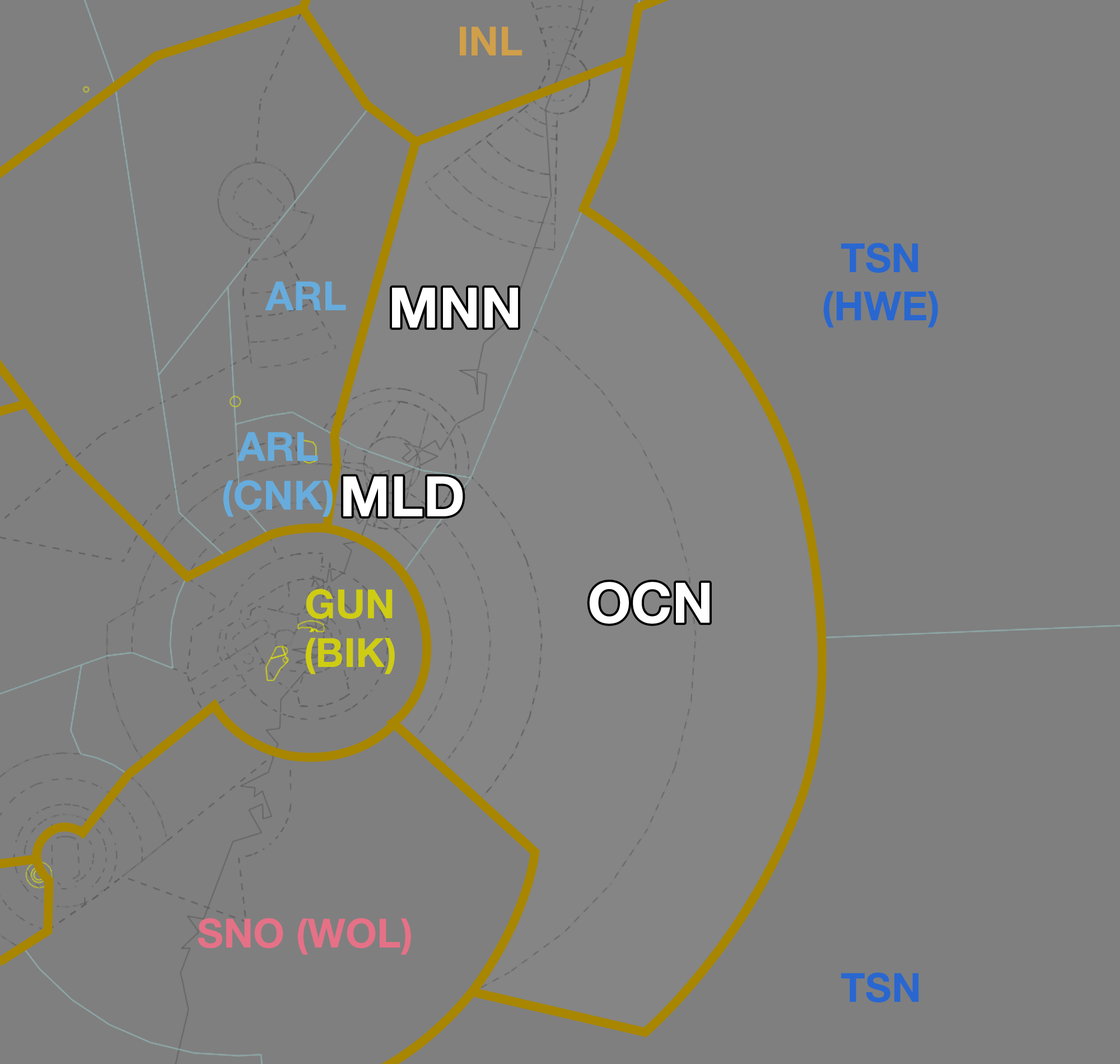
<style>
.page{position:relative;width:1120px;height:1064px;background:#7f7f7f}
.page>*{position:absolute;margin:0}
.t1{font:40.3px "HelveticaNeue-Bold";color:#d09f4a}
.t2{font:40.3px "HelveticaNeue-Bold";color:#2967cf}
.t3{font:40.3px "HelveticaNeue-Bold";color:#67acdc}
.t4{font:56px "HelveticaNeue-Bold";color:#ffffff}
.t5{font:40.3px "HelveticaNeue-Bold";color:#cecc13}
.t6{font:40.3px "HelveticaNeue-Bold";color:#e57187}
</style>
<div class="page">
<p class="t1" style="left:460px;top:26px;width:63px;height:29px">INL</p>
<p class="t2" style="left:823px;top:243px;width:115px;height:85px;text-align:center">TSN<br>(HWE)</p>
<p class="t3" style="left:265px;top:281px;width:81px;height:29px">ARL</p>
<p class="t4" style="left:392px;top:287px;width:126px;height:41px">MNN</p>
<p class="t3" style="left:223px;top:432px;width:110px;height:85px;text-align:center">ARL<br>(CNK)</p>
<p class="t4" style="left:343px;top:476px;width:120px;height:40px">MLD</p>
<p class="t5" style="left:305px;top:589px;width:90px;height:85px;text-align:center">GUN<br>(BIK)</p>
<p class="t4" style="left:589px;top:582px;width:121px;height:42px">OCN</p>
<p class="t6" style="left:198px;top:918px;width:213px;height:37px">SNO (WOL)</p>
<p class="t2" style="left:841px;top:972px;width:78px;height:31px">TSN</p>
</div>
